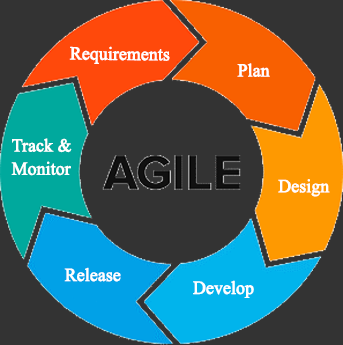
<style>
.page{position:relative;width:343px;height:345px;background:#333333}
.page>*{position:absolute;margin:0}
.t1{font:18.3px "TimesNewRomanPSMT";letter-spacing:-0.02em;color:#ffffff;font-weight:bold;scale:0.97 1}
.t2{font:13.8px "TimesNewRomanPSMT";letter-spacing:-0.02em;color:#ffffff;font-weight:bold;scale:0.97 1}
.t3{font:13.8px/23.2px "TimesNewRomanPSMT";letter-spacing:-0.02em;color:#ffffff;font-weight:bold;scale:0.97 1}
</style>
<div class="page">
<p class="t1" style="left:69px;top:46px;width:101px;height:18px;rotate:1deg">Requirements</p>
<p class="t2" style="left:237px;top:63px;width:33px;height:14px">Plan</p>
<p class="t3" style="left:11px;top:138px;width:61px;height:38px">Track &amp;<br>Monitor</p>
<p class="t2" style="left:278px;top:179px;width:52px;height:18px">Design</p>
<p class="t2" style="left:64px;top:267px;width:57px;height:15px">Release</p>
<p class="t2" style="left:193px;top:280px;width:61px;height:18px">Develop</p>
</div>
